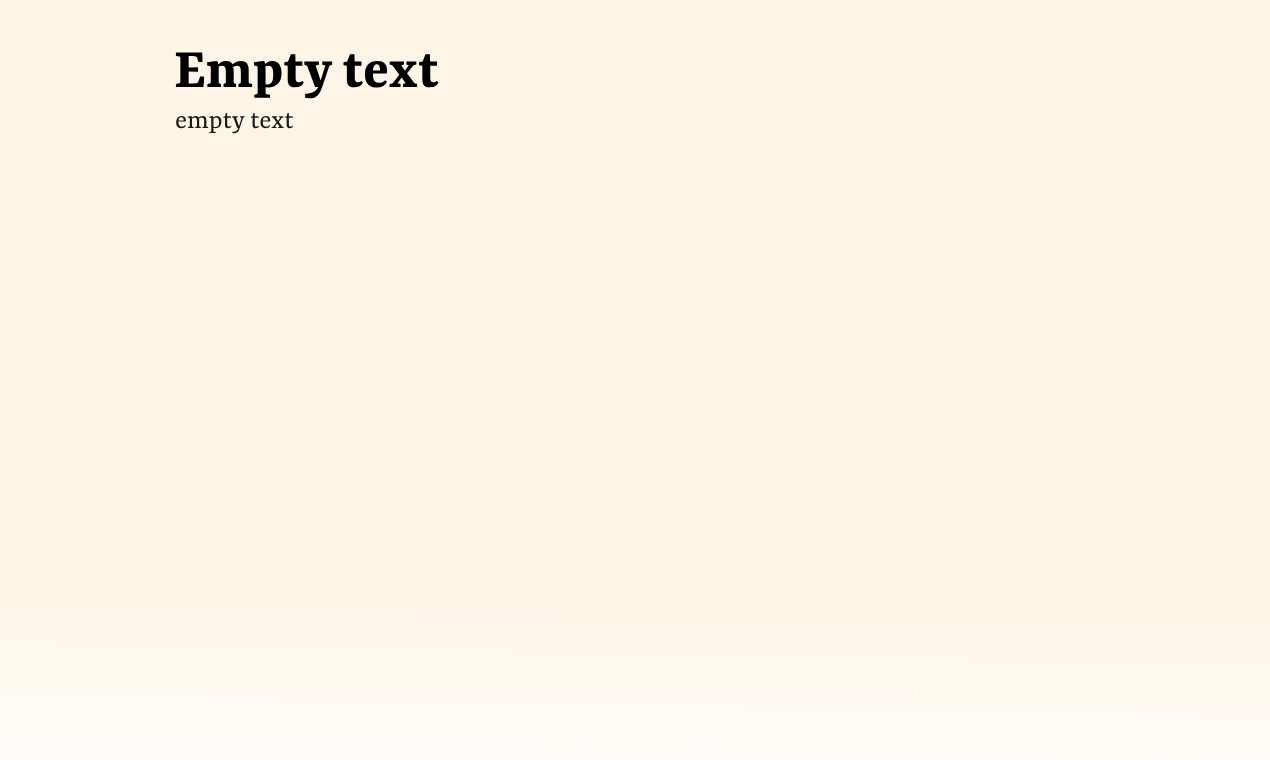
<style>
.page{position:relative;width:1270px;height:760px;background:#fff5e6}
.page>*{position:absolute;margin:0}
.t1{font:60px "Yrsa-Bold";color:#000000}
.t2{font:28px "Yrsa-Regular";color:#1a1a1a}
</style>
<div class="page">
<p class="t1" style="left:175px;top:52px;width:264px;height:47px">Empty text</p>
<p class="t2" style="left:176px;top:112px;width:118px;height:22px">empty text</p>
</div>
